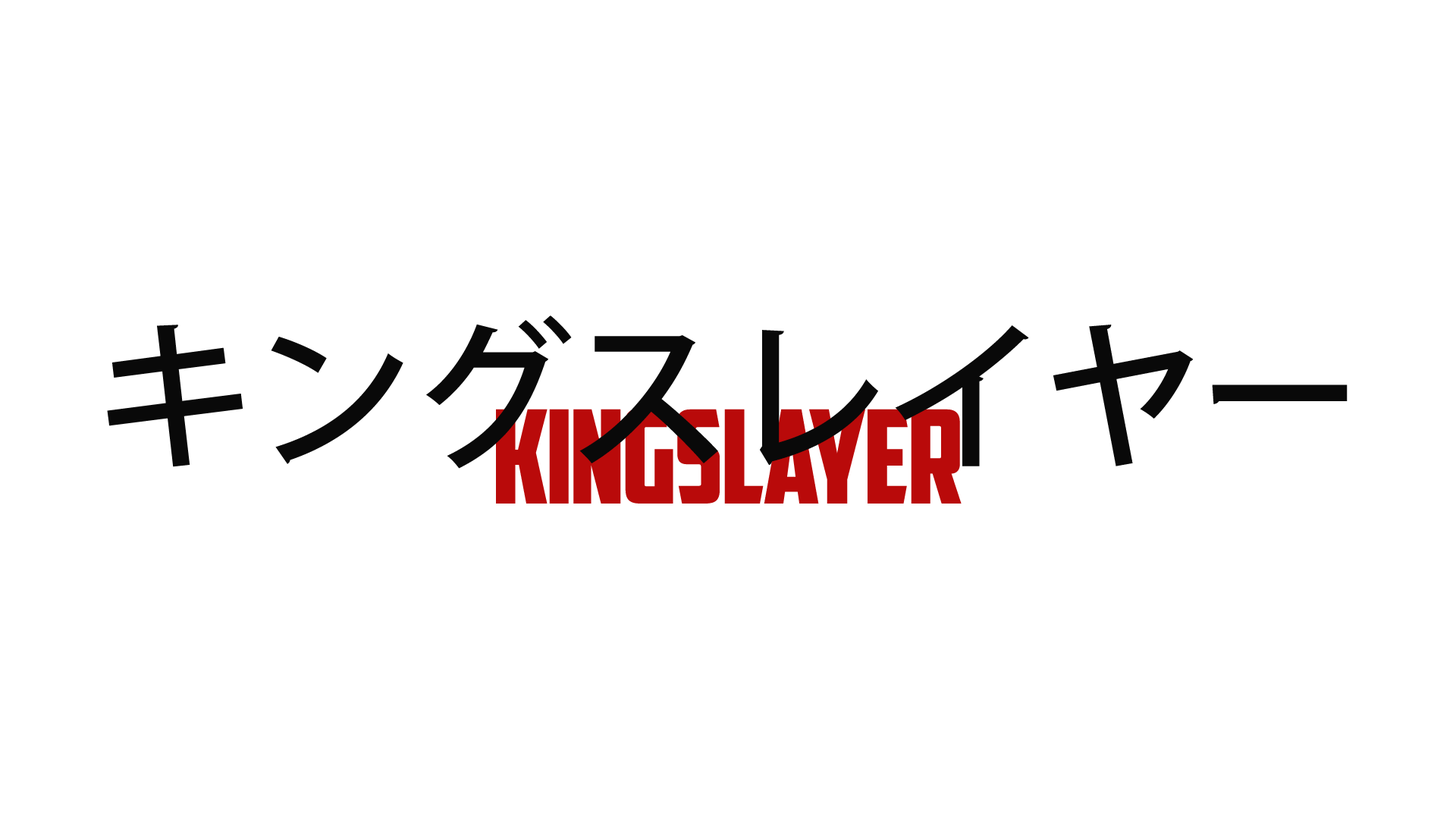
<style>
.page{position:relative;width:1456px;height:819px;background:#ffffff}
.page>*{position:absolute;margin:0}
.t1{font:161.1px "AdobeFanHeitiStd-Bold";letter-spacing:-0.02em;color:#090909}
.t2{font:129.5px "AmericanCaptain";letter-spacing:-0.02em;color:#b90a0a}
</style>
<div class="page">
<p class="t1" style="left:107px;top:315px;width:1241px;height:154px">キングスレイヤー</p>
<p class="t2" style="left:496px;top:409px;width:466px;height:95px">KINGSLAYER</p>
</div>
